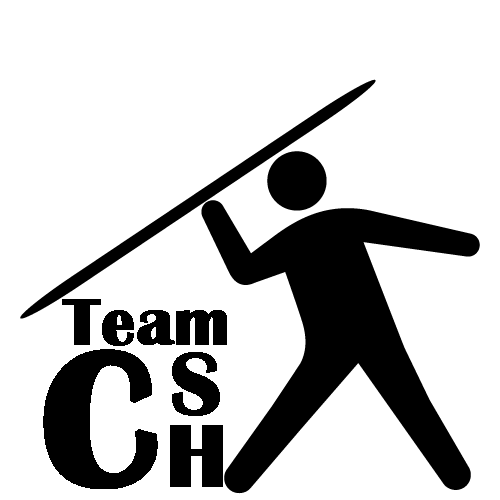
<style>
.page{position:relative;width:500px;height:500px;background:#ffffff}
.page>*{position:absolute;margin:0}
.t1{font:68px "BritannicBold";color:#000000;font-weight:bold}
.t2{font:195px "BritannicBold";color:#000000;font-weight:bold}
.t3{font:92px "BritannicBold";color:#000000;font-weight:bold}
</style>
<div class="page">
<p class="t1" style="left:62px;top:299px;width:165px;height:47px">Team</p>
<p class="t2" style="left:43px;top:349px;width:115px;height:140px">C</p>
<p class="t3" style="left:172px;top:352px;width:48px;height:64px">S</p>
<p class="t3" style="left:170px;top:425px;width:53px;height:62px">H</p>
</div>
